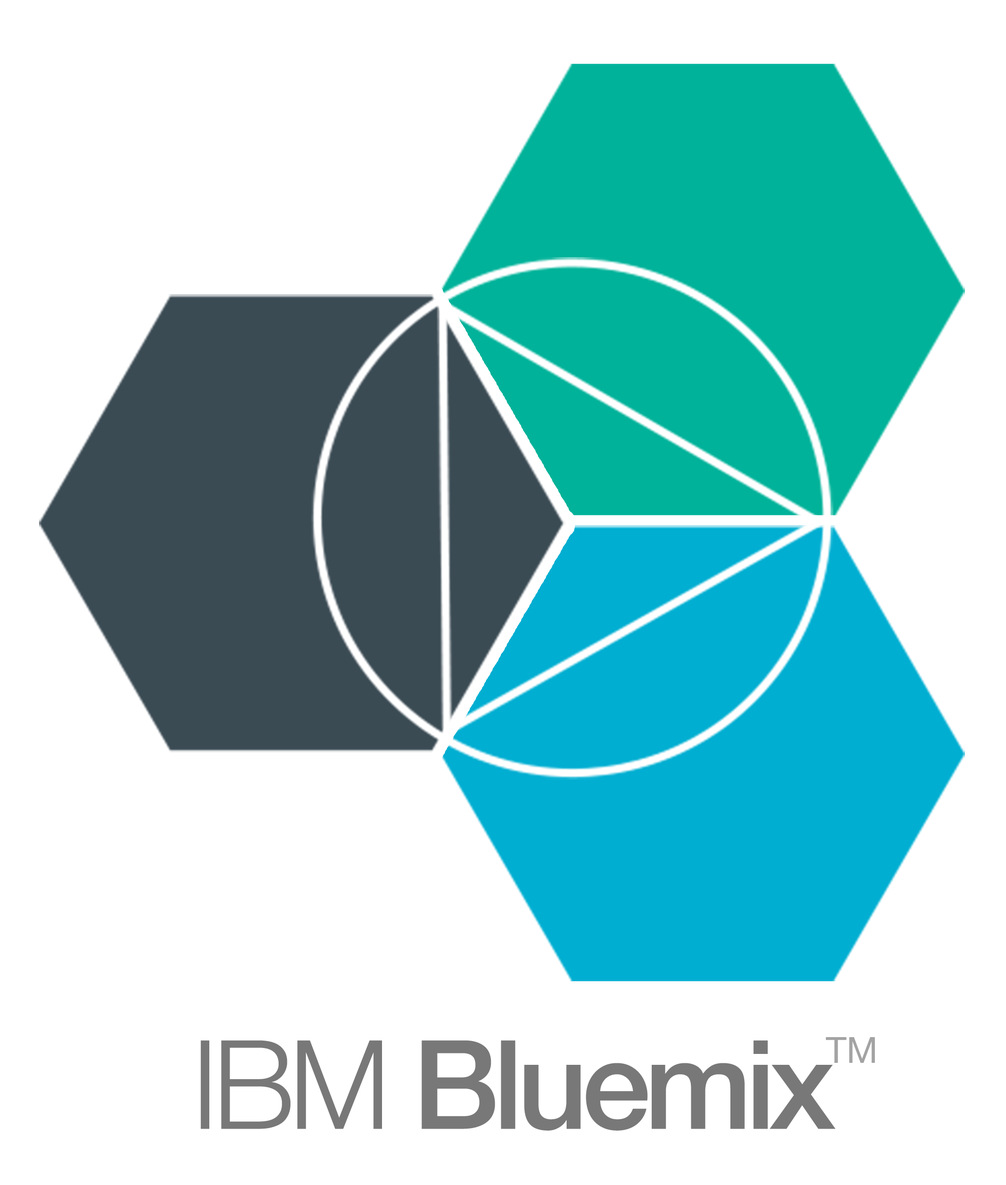
<style>
.page{position:relative;width:1006px;height:1185px;background:#ffffff}
.page>*{position:absolute;margin:0}
.t1{font:36px "HelveticaNeue";color:#a3a3a3}
.t2{font:123.7px "HelveticaNeue-Medium";letter-spacing:-0.05em;color:#787878}
.t3{font:123.7px "HelveticaNeue-Light";letter-spacing:-0.05em;color:#787878}
</style>
<div class="page">
<p class="t1" style="left:826px;top:1038px;width:49px;height:25px">TM</p>
<p class="t2" style="left:200px;top:1041px;width:636px;height:90px"><span class="t3">IBM </span>Bluemix</p>
</div>
